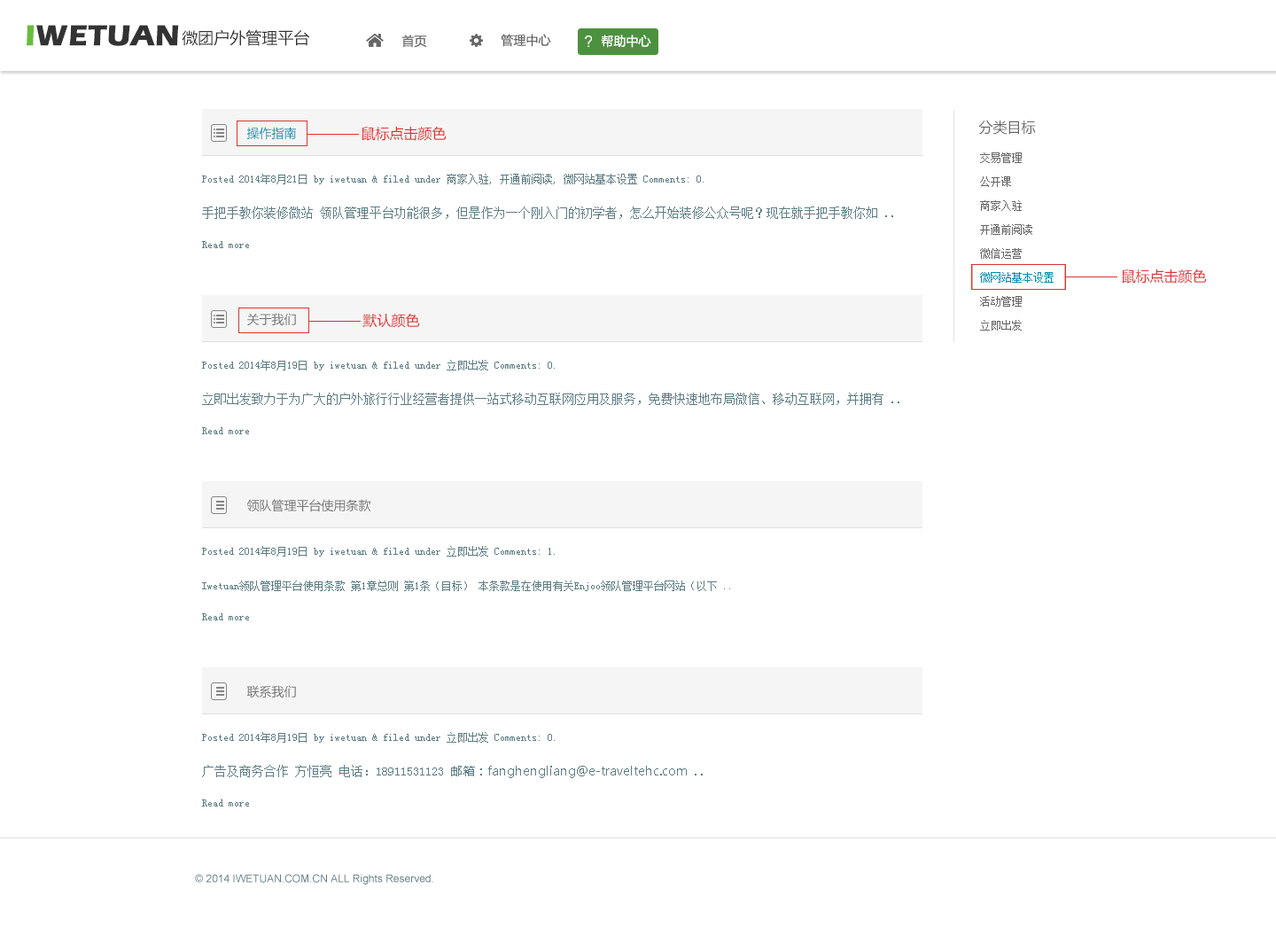
<style>
.page{position:relative;width:1276px;height:935px;background:#ffffff}
.page>*{position:absolute;margin:0}
.t1{font:30.1px "ErasITC-Bold";color:#333333}
.t2{font:30.1px "ErasITC-Bold";color:#67bd3c}
.t3{font:15.9px "MicrosoftYaHei";color:#333333}
.t4{font:12.4px "MicrosoftYaHei";color:#666666}
.t5{font:12.4px "MicrosoftYaHei";color:#ffffff}
.t6{font:14.2px "MicrosoftYaHei";color:#e03131}
.t7{font:14.2px "MicrosoftYaHei";color:#666666}
.t8{font:12.4px "MicrosoftYaHei";color:#048eb0}
.t9{font:10.6px "SimSun";color:#666666}
.t10{font:10.6px "SimSun";color:#5d7c84}
.t11{font:12.4px "SimSun";color:#5d7c84}
.t12{font:10.6px "SimSun";color:#048eb0}
.t13{font:12.4px "MicrosoftYaHei";color:#747474}
.t14{font:12.4px "MicrosoftYaHei";color:#5d7c84}
.t15{font:10.6px "ArialMT";color:#5d7c84}
</style>
<div class="page">
<p class="t1" style="left:27px;top:25px;width:152px;height:21px"><span class="t2">I</span>WETUAN</p>
<p class="t3" style="left:182px;top:29px;width:128px;height:17px">微团户外管理平台</p>
<p class="t4" style="left:401px;top:35px;width:26px;height:13px">首页</p>
<p class="t4" style="left:501px;top:34px;width:50px;height:13px">管理中心</p>
<p class="t5" style="left:601px;top:35px;width:50px;height:13px">帮助中心</p>
<p class="t6" style="left:361px;top:126px;width:86px;height:15px">鼠标点击颜色</p>
<p class="t7" style="left:978px;top:120px;width:58px;height:15px">分类目标</p>
<p class="t8" style="left:246px;top:127px;width:50px;height:13px">操作指南</p>
<p class="t9" style="left:980px;top:152px;width:42px;height:11px">交易管理</p>
<p class="t10" style="left:202px;top:174px;width:501px;height:10px">Posted 2014年8月21日 by iwetuan &amp; filed under 商家入驻, 开通前阅读, 微网站基本设置 Comments: 0.</p>
<p class="t9" style="left:980px;top:176px;width:31px;height:11px">公开课</p>
<p class="t11" style="left:202px;top:206px;width:691px;height:13px">手把手教你装修微站 领队管理平台功能很多，但是作为一个刚入门的初学者，怎么开始装修公众号呢？现在就手把手教你如 ..</p>
<p class="t9" style="left:980px;top:200px;width:42px;height:11px">商家入驻</p>
<p class="t9" style="left:980px;top:224px;width:52px;height:11px">开通前阅读</p>
<p class="t10" style="left:202px;top:241px;width:47px;height:7px">Read more</p>
<p class="t9" style="left:980px;top:248px;width:42px;height:11px">微信运营</p>
<p class="t6" style="left:1122px;top:268px;width:85px;height:16px">鼠标点击颜色</p>
<p class="t12" style="left:980px;top:272px;width:73px;height:11px">微网站基本设置</p>
<p class="t9" style="left:980px;top:296px;width:42px;height:11px">活动管理</p>
<p class="t13" style="left:247px;top:313px;width:49px;height:13px">关于我们</p>
<p class="t6" style="left:362px;top:313px;width:58px;height:15px">默认颜色</p>
<p class="t9" style="left:980px;top:320px;width:42px;height:10px">立即出发</p>
<p class="t10" style="left:202px;top:360px;width:353px;height:10px">Posted 2014年8月19日 by iwetuan &amp; filed under 立即出发 Comments: 0.</p>
<p class="t11" style="left:202px;top:392px;width:697px;height:13px">立即出发致力于为广大的户外旅行行业经营者提供一站式移动互联网应用及服务，免费快速地布局微信、移动互联网，并拥有 ..</p>
<p class="t10" style="left:202px;top:427px;width:47px;height:7px">Read more</p>
<p class="t13" style="left:246px;top:499px;width:125px;height:13px">领队管理平台使用条款</p>
<p class="t10" style="left:202px;top:546px;width:353px;height:10px">Posted 2014年8月19日 by iwetuan &amp; filed under 立即出发 Comments: 1.</p>
<p class="t10" style="left:202px;top:580px;width:528px;height:11px">Iwetuan领队管理平台使用条款 第1章总则 第1条（目标） 本条款是在使用有关Enjoo领队管理平台网站（以下 ..</p>
<p class="t10" style="left:202px;top:613px;width:47px;height:7px">Read more</p>
<p class="t13" style="left:246px;top:685px;width:50px;height:13px">联系我们</p>
<p class="t10" style="left:202px;top:732px;width:353px;height:10px">Posted 2014年8月19日 by iwetuan &amp; filed under 立即出发 Comments: 0.</p>
<p class="t14" style="left:202px;top:765px;width:501px;height:13px"><span class="t11">广告及商务合作 方恒亮 电话：18911531123 </span>邮箱：fanghengliang@e-traveltehc.com<span class="t11"> ..</span></p>
<p class="t10" style="left:202px;top:799px;width:47px;height:7px">Read more</p>
<p class="t15" style="left:195px;top:874px;width:238px;height:10px">© 2014 IWETUAN.COM.CN ALL Rights Reserved.</p>
</div>
